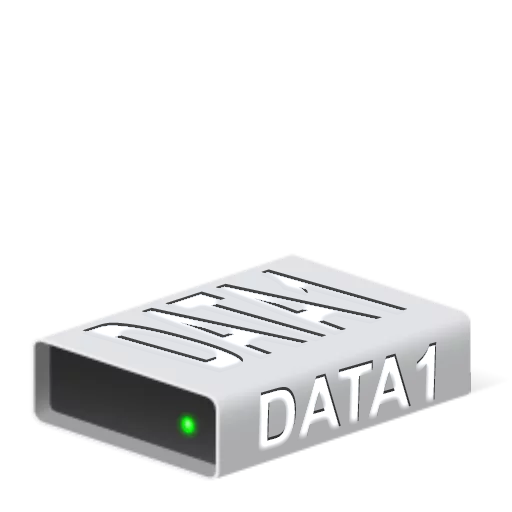
<style>
.page{position:relative;width:512px;height:512px;background:#ffffff}
.page>*{position:absolute;margin:0}
.t1{font:79.9px "Arial-BoldMT";color:#ffffff;scale:0.77 1}
</style>
<div class="page">
<p class="t1" style="left:258px;top:345px;width:178px;height:108px;rotate:-16deg">DATA1</p>
</div>
